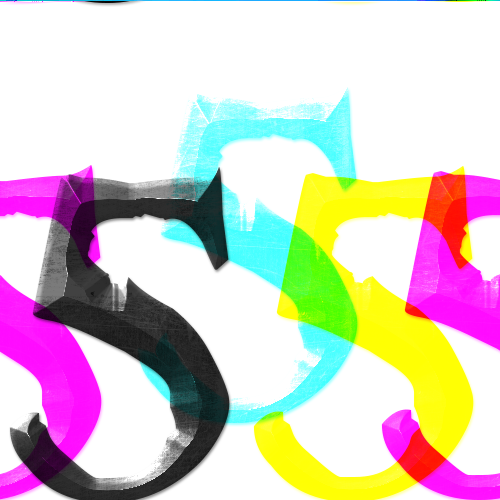
<style>
.page{position:relative;width:500px;height:500px;background:#ffffff}
.page>*{position:absolute;margin:0}
.t1{font:500px "PiecesofEight"}
</style>
<div class="page">
<p class="t1" style="left:137px;top:86px;width:221px;height:336px">5</p>
</div>
